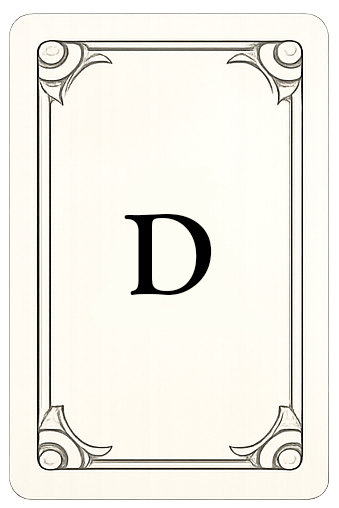
<style>
.page{position:relative;width:339px;height:508px}
.page>*{position:absolute;margin:0}
.t1{font:120px "GoudyOldStyleT-Bold";color:#000000}
</style>
<div class="page">
<p class="t1" style="left:124px;top:214px;width:88px;height:81px">D</p>
</div>
